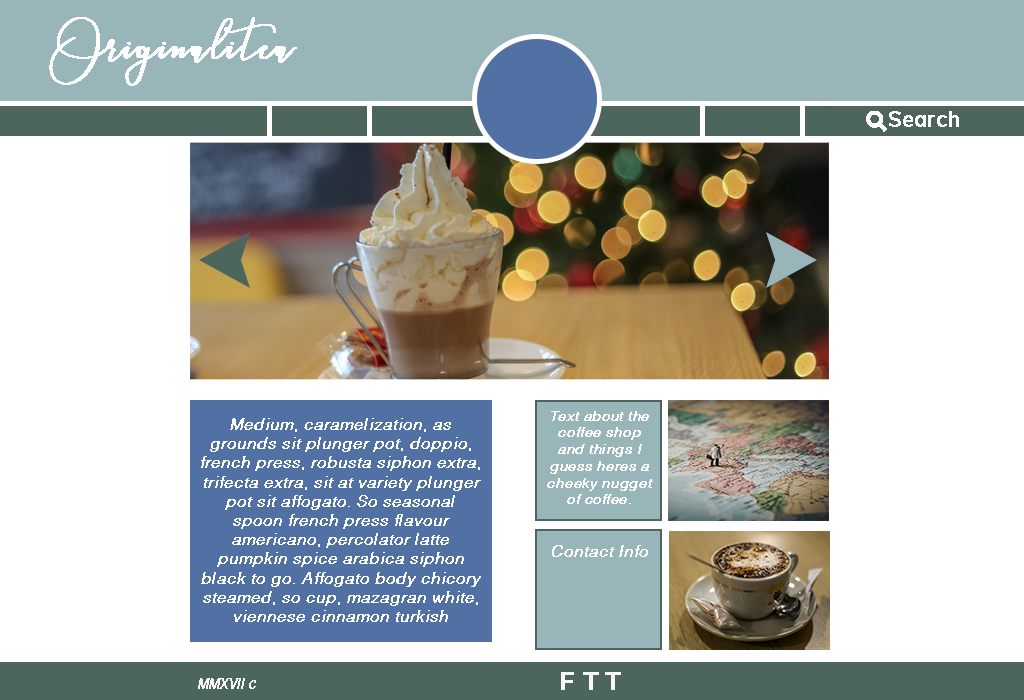
<style>
.page{position:relative;width:1024px;height:700px;background:#ffffff}
.page>*{position:absolute;margin:0}
.t1{font:72px "LoveHewits";color:#ffffff;font-weight:bold}
.t2{font:14px "Helvetica-LightOblique";color:#ffffff;font-weight:bold}
.t3{font:16px "Helvetica-LightOblique";color:#ffffff;font-weight:bold}
.t4{font:16px "Helvetica-LightOblique";color:#f8f8f8;font-weight:bold;scale:0.78 1}
</style>
<div class="page">
<p class="t1" style="left:49px;top:17px;width:248px;height:69px">Originalitea</p>
<p class="t2" style="left:547px;top:411px;width:106px;height:93px;text-align:center">Text about the coffee shop and things I guess heres a cheeky nugget of coffee.</p>
<p class="t3" style="left:201px;top:418px;width:280px;height:204px;text-align:center">Medium, caramelization, as grounds sit plunger pot, doppio, french press, robusta siphon extra, trifecta extra, sit at variety plunger pot sit affogato. So seasonal spoon french press flavour americano, percolator latte pumpkin spice arabica siphon black to go. Affogato body chicory steamed, so cup, mazagran white, viennese cinnamon turkish pumpkin spice foam. Doppio black, froth wings, sugar, aroma, fair trade extra steamed black single shot, java, saucer mocha, at java cappuccino carajillo kopi-luwak. Variety grinder viennese whipped decaffeinated pumpkin spice, aged flavour, doppio, in, percolator eu as mocha mug crema mug so café au lai<br>t.</p>
<p class="t3" style="left:552px;top:545px;width:96px;height:12px">Contact Info</p>
<p class="t4" style="left:198px;top:678px;width:58px;height:11px">MMXVII c</p>
</div>
